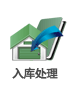
<style>
.page{position:relative;width:74px;height:95px;background:#ffffff}
.page>*{position:absolute;margin:0}
.t1{font:11px "MicrosoftYaHei";color:#4a4a4a;font-weight:bold}
</style>
<div class="page">
<p class="t1" style="left:12px;top:67px;width:46px;height:12px">入库处理</p>
</div>
